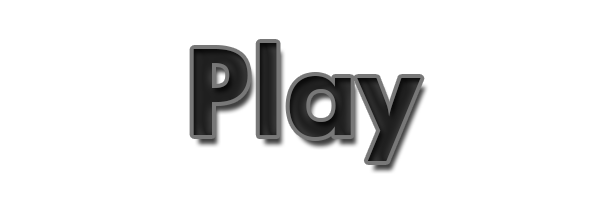
<style>
.page{position:relative;width:600px;height:200px;background:#ffffff}
.page>*{position:absolute;margin:0}
.t1{font:120px "FuturaBT-Heavy";color:#212121}
</style>
<div class="page">
<p class="t1" style="left:193px;top:43px;width:228px;height:118px">Play</p>
</div>
